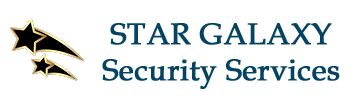
<style>
.page{position:relative;width:362px;height:99px;background:#ffffff}
.page>*{position:absolute;margin:0}
.t1{font:30px "BookAntiqua";color:#044362;font-weight:bold}
</style>
<div class="page">
<p class="t1" style="left:102px;top:23px;width:238px;height:66px;text-align:center">STAR GALAXY <br>Security Services</p>
</div>
